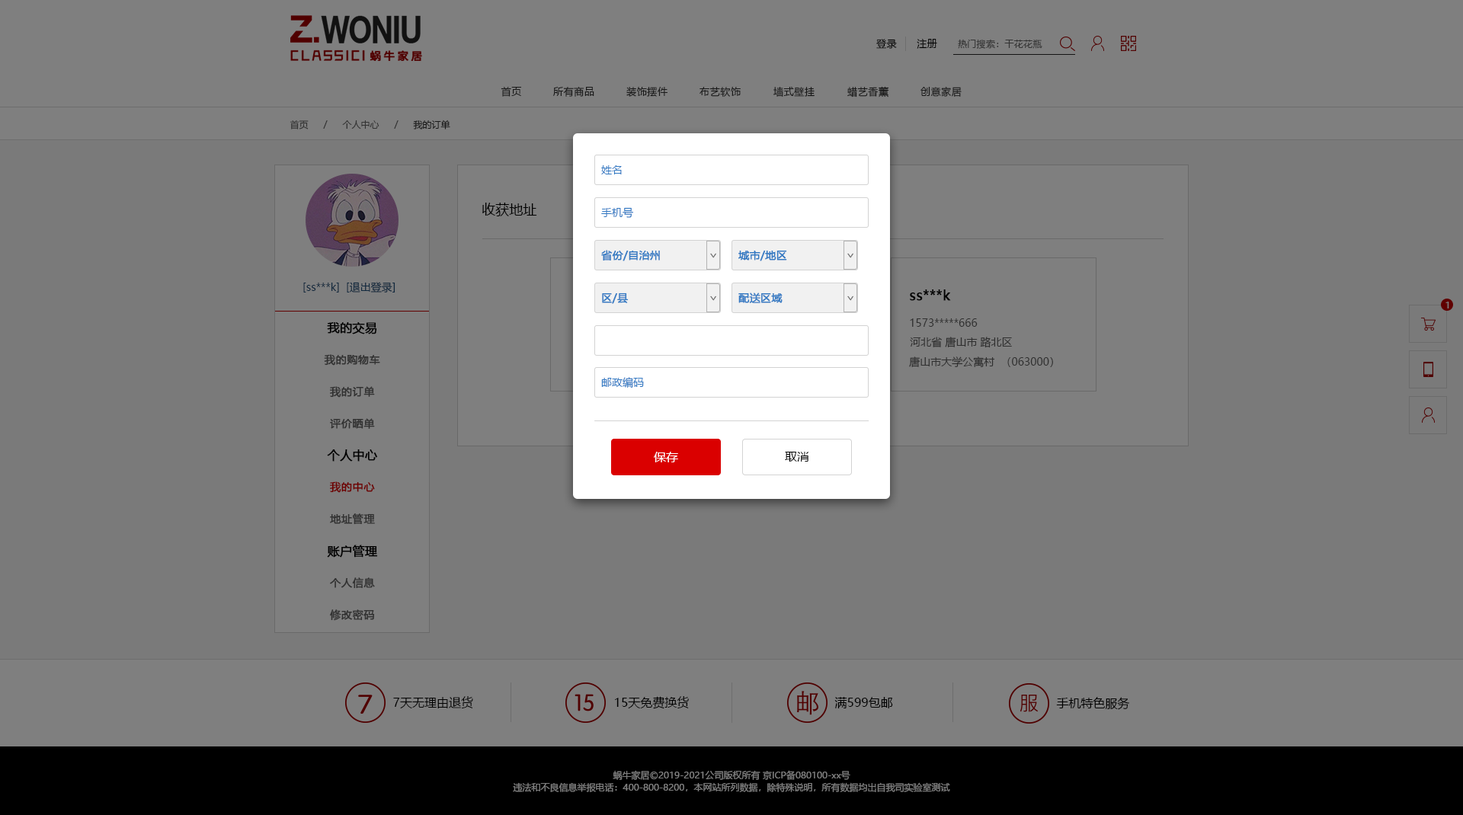
<style>
.page{position:relative;width:1463px;height:815px;background:#7a7a7a}
.page>*{position:absolute;margin:0}
.t1{font:9.9px "MicrosoftYaHei";letter-spacing:0.05em;color:#000000}
.t2{font:9.1px "MicrosoftYaHei";letter-spacing:0.025em;color:#343434}
.t3{font:9.9px "MicrosoftYaHei";letter-spacing:0.05em;color:#191919}
.t4{font:9.1px "MicrosoftYaHei";color:#333333}
.t5{font:9.1px "MicrosoftYaHei";color:#191919}
.t6{font:10.7px "MicrosoftYaHei";color:#337ac3}
.t7{font:13.7px "MicrosoftYaHei";color:#000000}
.t8{font:10.7px "MicrosoftYaHei";color:#337ac3;font-weight:bold}
.t9{font:10.7px "MicrosoftYaHei";color:#11293e}
.t10{font:13.7px "MicrosoftYaHei";color:#000000;font-weight:bold}
.t11{font:9.1px "MicrosoftYaHei";letter-spacing:0.025em;color:#7f7f7f}
.t12{font:12.2px "MicrosoftYaHei";color:#000000;font-weight:bold}
.t13{font:10.7px "MicrosoftYaHei";color:#2f2f2f}
.t14{font:10.7px "MicrosoftYaHei";letter-spacing:0.025em;color:#313131;font-weight:bold}
.t15{font:12.2px "MicrosoftYaHei";color:#ffffff}
.t16{font:12.2px "MicrosoftYaHei";color:#000000}
.t17{font:10.7px "MicrosoftYaHei";letter-spacing:0.025em;color:#6d0000;font-weight:bold}
.t18{font:9.1px/12.2px "MicrosoftYaHei";color:#7f7f7f}
</style>
<div class="page">
<p class="t1" style="left:876px;top:39px;width:21px;height:10px">登录</p>
<p class="t1" style="left:917px;top:39px;width:20px;height:10px">注册</p>
<p class="t2" style="left:958px;top:39px;width:84px;height:10px">热门搜索：干花花瓶</p>
<p class="t3" style="left:501px;top:87px;width:20px;height:10px">首页</p>
<p class="t3" style="left:553px;top:87px;width:41px;height:10px">所有商品</p>
<p class="t3" style="left:626px;top:87px;width:41px;height:10px">装饰摆件</p>
<p class="t3" style="left:699px;top:87px;width:42px;height:10px">布艺软饰</p>
<p class="t3" style="left:773px;top:87px;width:41px;height:10px">墙式壁挂</p>
<p class="t3" style="left:847px;top:86px;width:42px;height:12px">蜡艺香薰</p>
<p class="t3" style="left:920px;top:87px;width:41px;height:10px">创意家居</p>
<p class="t4" style="left:290px;top:120px;width:19px;height:10px">首页</p>
<p class="t4" style="left:323px;top:120px;width:5px;height:9px">/</p>
<p class="t4" style="left:342px;top:120px;width:37px;height:9px">个人中心</p>
<p class="t4" style="left:394px;top:120px;width:4px;height:9px">/</p>
<p class="t5" style="left:413px;top:120px;width:37px;height:10px">我的订单</p>
<p class="t6" style="left:601px;top:165px;width:21px;height:9px">姓名</p>
<p class="t7" style="left:482px;top:203px;width:55px;height:13px">收获地址</p>
<p class="t6" style="left:601px;top:207px;width:32px;height:11px">手机号</p>
<p class="t8" style="left:601px;top:250px;width:59px;height:11px">省份/自治州</p>
<p class="t8" style="left:738px;top:251px;width:49px;height:10px">城市/地区</p>
<p class="t9" style="left:347px;top:282px;width:48px;height:11px">[退出登录]</p>
<p class="t9" style="left:303px;top:283px;width:36px;height:10px">[ss***k]</p>
<p class="t8" style="left:602px;top:293px;width:27px;height:11px">区/县</p>
<p class="t8" style="left:738px;top:293px;width:44px;height:10px">配送区域</p>
<p class="t10" style="left:910px;top:290px;width:41px;height:11px">ss***k</p>
<p class="t11" style="left:1445px;top:302px;width:4px;height:7px">1</p>
<p class="t12" style="left:327px;top:322px;width:50px;height:12px">我的交易</p>
<p class="t13" style="left:910px;top:318px;width:67px;height:9px">1573*****666</p>
<p class="t13" style="left:910px;top:337px;width:102px;height:11px">河北省 唐山市 路北区</p>
<p class="t14" style="left:324px;top:354px;width:56px;height:12px">我的购物车</p>
<p class="t13" style="left:909px;top:357px;width:144px;height:10px">唐山市大学公寓村  （063000）</p>
<p class="t6" style="left:601px;top:377px;width:43px;height:11px">邮政编码</p>
<p class="t14" style="left:330px;top:386px;width:45px;height:12px">我的订单</p>
<p class="t14" style="left:330px;top:418px;width:45px;height:11px">评价晒单</p>
<p class="t12" style="left:327px;top:449px;width:51px;height:13px">个人中心</p>
<p class="t15" style="left:654px;top:452px;width:24px;height:10px">保存</p>
<p class="t16" style="left:785px;top:452px;width:23px;height:10px">取消</p>
<p class="t17" style="left:330px;top:481px;width:45px;height:12px">我的中心</p>
<p class="t14" style="left:330px;top:513px;width:45px;height:12px">地址管理</p>
<p class="t12" style="left:327px;top:545px;width:51px;height:13px">账户管理</p>
<p class="t14" style="left:330px;top:577px;width:45px;height:12px">个人信息</p>
<p class="t14" style="left:330px;top:609px;width:45px;height:12px">修改密码</p>
<p class="t16" style="left:393px;top:696px;width:80px;height:13px">7天无理由退货</p>
<p class="t16" style="left:615px;top:696px;width:74px;height:13px">15天免费换货</p>
<p class="t16" style="left:834px;top:697px;width:59px;height:12px">满599包邮</p>
<p class="t16" style="left:1056px;top:697px;width:74px;height:13px">手机特色服务</p>
<p class="t18" style="left:513px;top:770px;width:437px;height:22px;text-align:center">蜗牛家居©2019-2021公司版权所有 京ICP备080100-xx号<br>违法和不良信息举报电话：400-800-8200，本网站所列数据，除特殊说明，所有数据均出自我司实验室测试</p>
</div>
